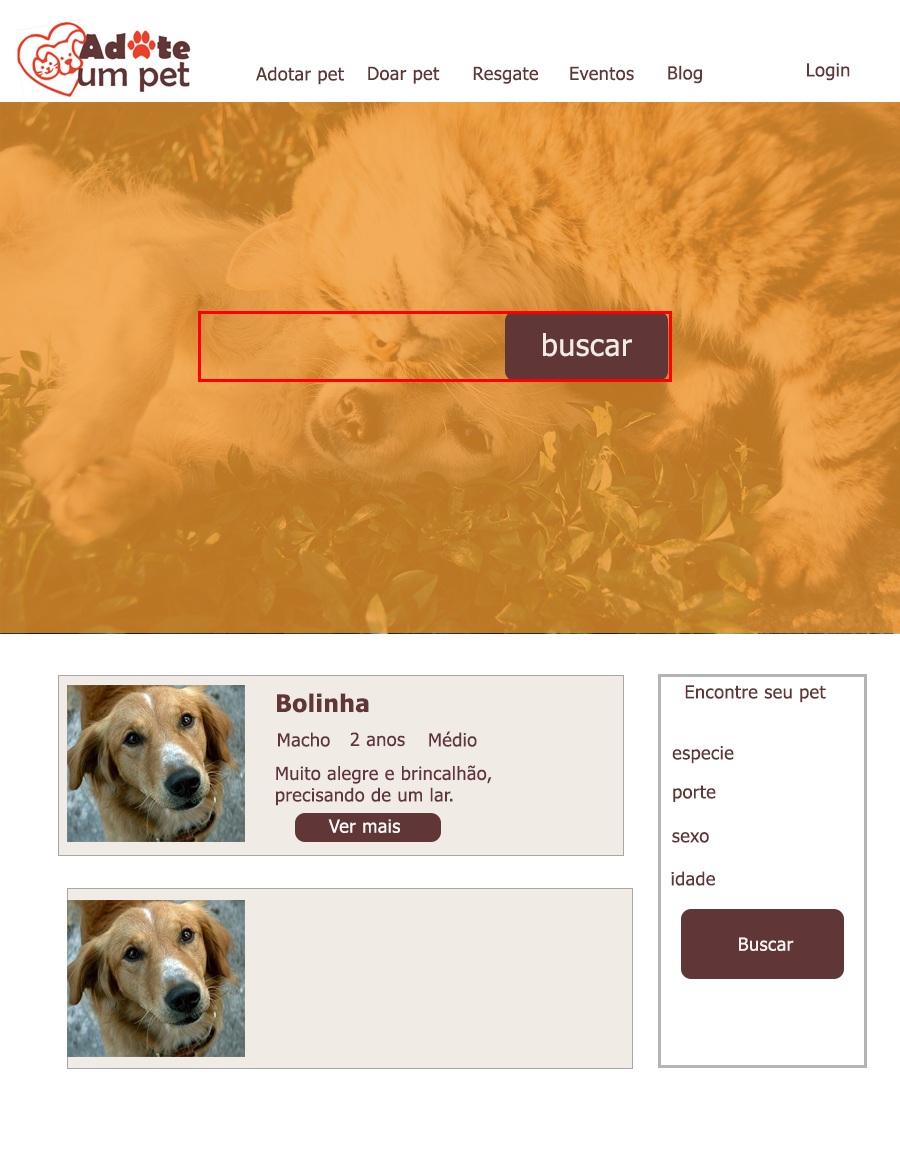
<style>
.page{position:relative;width:900px;height:1175px;background:#ffffff}
.page>*{position:absolute;margin:0}
.t1{font:18px "Tahoma";letter-spacing:0.025em;color:#603637}
.t2{font:30px "Tahoma";letter-spacing:0.025em;color:#f1ebe5}
.t3{font:24px "Tahoma-Bold";letter-spacing:0.025em;color:#603637}
.t4{font:18px "Tahoma";letter-spacing:0.025em;color:#fbf8f8}
.t5{font:18px "Tahoma";letter-spacing:0.025em;color:#f8f3f3}
</style>
<div class="page">
<p class="t1" style="left:668px;top:65px;width:34px;height:19px">Blog</p>
<p class="t1" style="left:807px;top:63px;width:43px;height:18px">Login</p>
<p class="t1" style="left:256px;top:66px;width:88px;height:19px">Adotar pet</p>
<p class="t1" style="left:368px;top:66px;width:72px;height:18px">Doar pet</p>
<p class="t1" style="left:473px;top:66px;width:65px;height:18px">Resgate</p>
<p class="t1" style="left:570px;top:66px;width:64px;height:15px">Eventos</p>
<p class="t2" style="left:543px;top:333px;width:89px;height:24px">buscar</p>
<p class="t1" style="left:685px;top:685px;width:141px;height:18px">Encontre seu pet</p>
<p class="t3" style="left:277px;top:693px;width:92px;height:20px">Bolinha</p>
<p class="t1" style="left:278px;top:732px;width:52px;height:15px">Macho</p>
<p class="t1" style="left:350px;top:732px;width:55px;height:15px">2 anos</p>
<p class="t1" style="left:429px;top:731px;width:48px;height:16px">Médio</p>
<p class="t1" style="left:672px;top:746px;width:62px;height:18px">especie</p>
<p class="t1" style="left:276px;top:765px;width:216px;height:41px">Muito alegre e brincalhão, <br>precisando de um lar.</p>
<p class="t1" style="left:673px;top:785px;width:43px;height:17px">porte</p>
<p class="t4" style="left:328px;top:819px;width:72px;height:14px">Ver mais</p>
<p class="t1" style="left:672px;top:832px;width:37px;height:11px">sexo</p>
<p class="t1" style="left:671px;top:871px;width:44px;height:15px">idade</p>
<p class="t5" style="left:739px;top:937px;width:55px;height:14px">Buscar</p>
</div>
